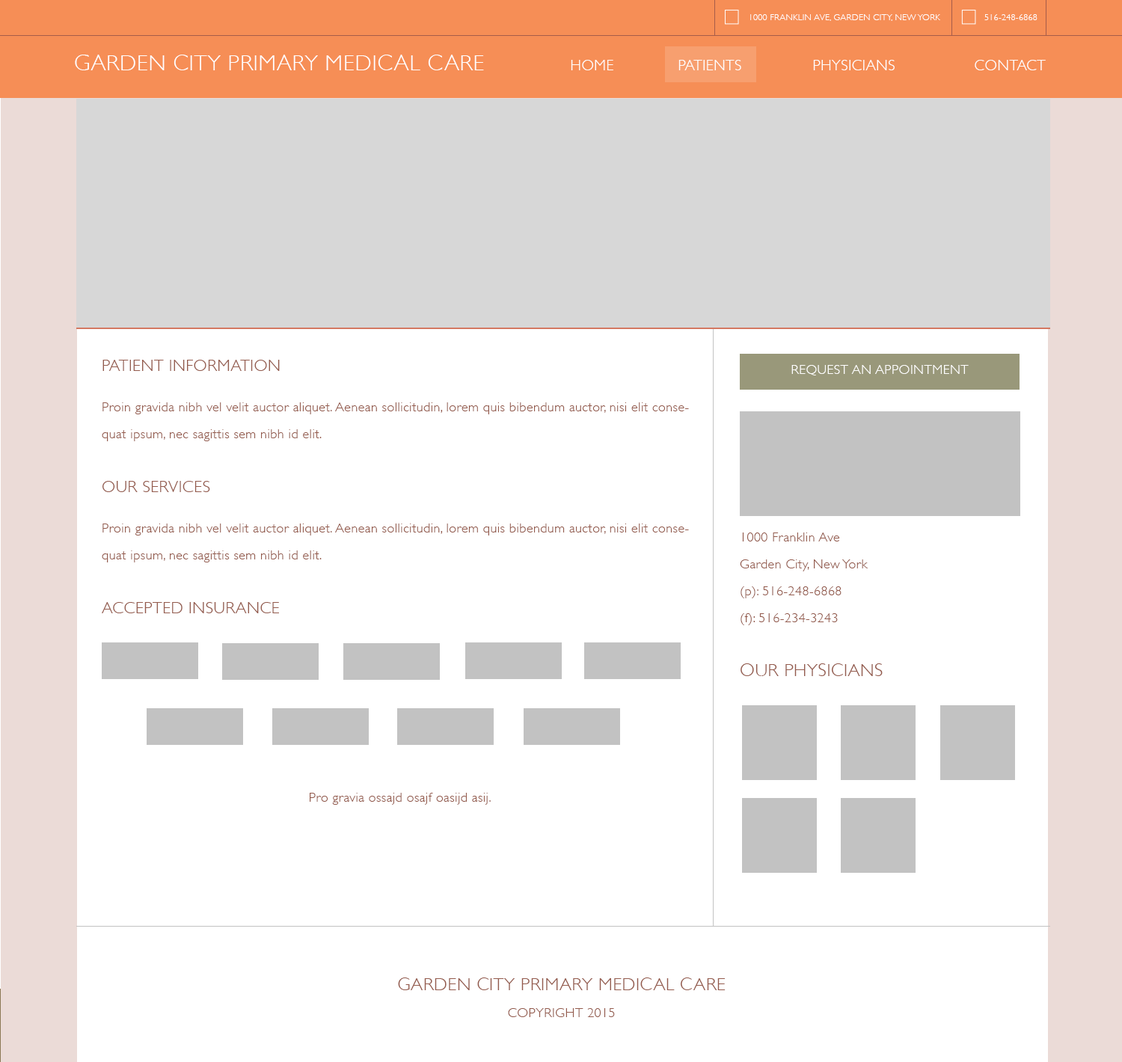
<style>
.page{position:relative;width:1122px;height:1062px;background:#ffffff}
.page>*{position:absolute;margin:0}
.t1{font:9px "GillSans-Light";letter-spacing:0.025em;color:#ffffff;text-transform:uppercase}
.t2{font:22.4px "GillSans-Light";letter-spacing:0.025em;color:#ffffff;text-transform:uppercase}
.t3{font:15px "GillSans-Light";letter-spacing:0.025em;color:#ffffff;text-transform:uppercase}
.t4{font:13.5px/26.9px "GillSans-Light";letter-spacing:0.025em;color:#945b4d}
.t5{font:16.5px/26.9px "GillSans-Light";letter-spacing:0.025em;color:#945b4d;text-transform:uppercase}
.t6{font:13.5px "GillSans-Light";letter-spacing:0.025em;color:#ffffff;text-transform:uppercase}
.t7{font:18px/26.9px "GillSans-Light";letter-spacing:0.025em;color:#945b4d;text-transform:uppercase}
.t8{font:13.5px "GillSans-Light";letter-spacing:0.025em;color:#945b4d}
.t9{font:13.5px/26.9px "GillSans-Light";letter-spacing:0.025em;color:#945b4d;text-transform:uppercase}
</style>
<div class="page">
<p class="t1" style="left:750px;top:14px;width:191px;height:7px">1000 Franklin Ave, Garden City, NEw yORK</p>
<p class="t1" style="left:985px;top:14px;width:53px;height:6px">516-248-6868</p>
<p class="t2" style="left:75px;top:55px;width:409px;height:15px">Garden City Primary mEDICAL cARE</p>
<p class="t3" style="left:571px;top:60px;width:475px;height:10px">Home    Patients    Physicians    Contact</p>
<p class="t4" style="left:102px;top:360px;width:587px;height:254px"><span class="t5">Patient Information<br><br></span>Proin gravida nibh vel velit auctor aliquet. Aenean sollicitudin, lorem quis bibendum auctor, nisi elit consequat ipsum, nec sagittis sem nibh id elit.<br><br><span class="t5">Our Services<br><br></span>Proin gravida nibh vel velit auctor aliquet. Aenean sollicitudin, lorem quis bibendum auctor, nisi elit consequat ipsum, nec sagittis sem nibh id elit.<br><br><span class="t5">Accepted Insurance</span></p>
<p class="t6" style="left:792px;top:365px;width:177px;height:11px">Request An Appointment</p>
<p class="t4" style="left:740px;top:533px;width:143px;height:143px">1000 Franklin Ave<br>Garden City, New York <br>(p): 516-248-6868<br>(f): 516-234-3243<br><br><span class="t7">Our Physicians</span></p>
<p class="t8" style="left:310px;top:793px;width:181px;height:12px">Pro gravia ossajd osajf oasijd asij.</p>
<p class="t7" style="left:398px;top:978px;width:328px;height:40px;text-align:center">Garden City Primary Medical Care<br><span class="t9">Copyright 2015</span></p>
</div>
